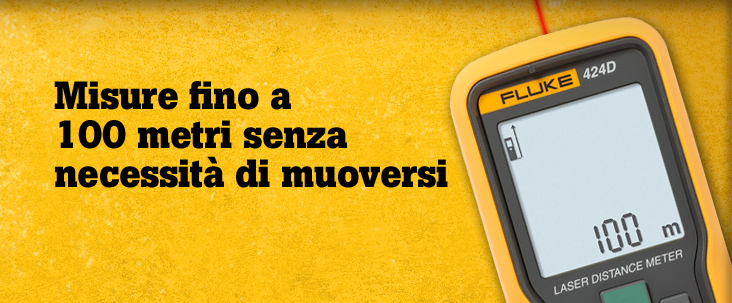
<style>
.page{position:relative;width:732px;height:303px}
.page>*{position:absolute;margin:0}
.t1{font:39px/39px "BotonPro-Bold";letter-spacing:-0.01em;color:#000000}
</style>
<div class="page">
<p class="t1" style="left:54px;top:81px;width:394px;height:107px">Misure fino a <br>100 metri senza <br>necessità di muoversi</p>
</div>
